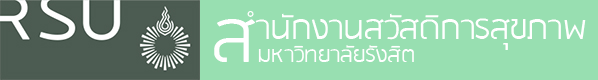
<style>
.page{position:relative;width:598px;height:80px;background:#98dfb1}
.page>*{position:absolute;margin:0}
.t1{font:37.5px "RSU-Light";color:#ffffff}
.t2{font:83.3px "RSU-Light";color:#ffffff}
.t3{font:25px "RSU-Light";color:#ffffff}
</style>
<div class="page">
<p class="t1" style="left:247px;top:11px;width:339px;height:39px">ำนักงานสวัสดิการสุขภาพ</p>
<p class="t2" style="left:214px;top:19px;width:41px;height:43px">ส</p>
<p class="t3" style="left:258px;top:45px;width:156px;height:18px">มหาวิทยาลัยรังสิต</p>
</div>
